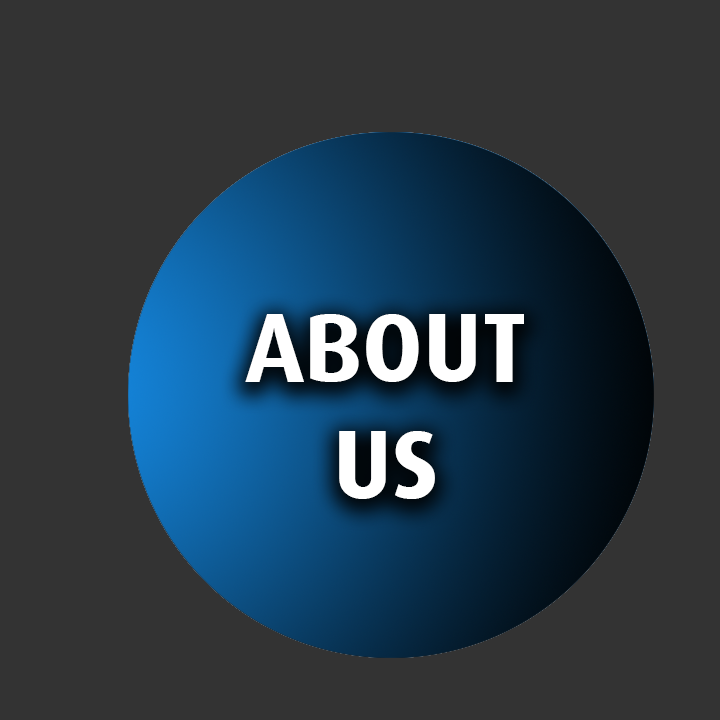
<style>
.page{position:relative;width:720px;height:720px;background:#333333}
.page>*{position:absolute;margin:0}
.t1{font:97px "DaxBold";color:#ffffff}
</style>
<div class="page">
<p class="t1" style="left:245px;top:314px;width:279px;height:185px;text-align:center">ABOUT<br>US</p>
</div>
